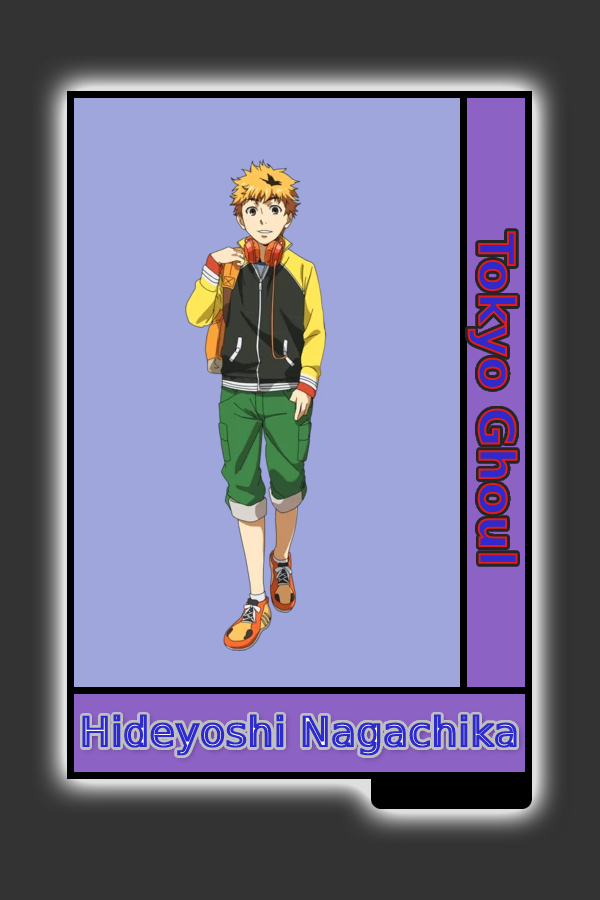
<style>
.page{position:relative;width:600px;height:900px;background:#9ea6db}
.page>*{position:absolute;margin:0}
.t1{font:48.8px "MADETOMMY-Bold"}
.t2{font:40px "CoolveticaRg-Regular";color:#2e2acc;font-weight:bold}
</style>
<div class="page">
<p class="t1" style="left:467px;top:231px;width:51px;height:333px;rotate:90deg">Tokyo Ghoul</p>
<p class="t2" style="left:82px;top:714px;width:435px;height:42px">Hideyoshi Nagachika</p>
</div>
